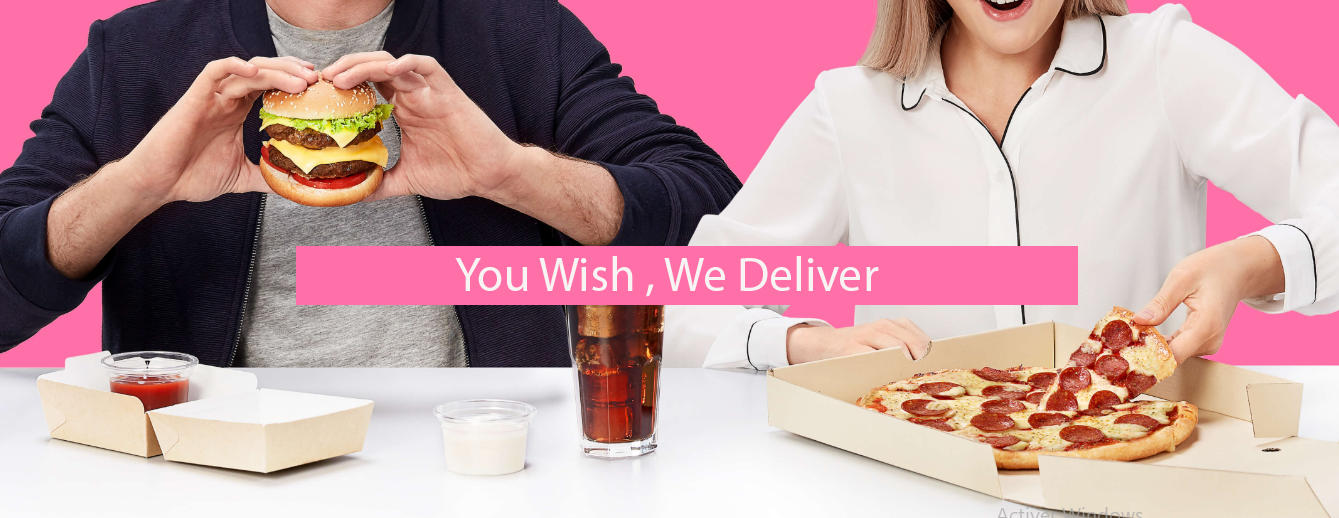
<style>
.page{position:relative;width:1339px;height:518px}
.page>*{position:absolute;margin:0}
.t1{font:48px "MyriadPro-Regular";color:#f9f4f4}
</style>
<div class="page">
<p class="t1" style="left:455px;top:256px;width:424px;height:41px">You Wish , We Deliver</p>
</div>
